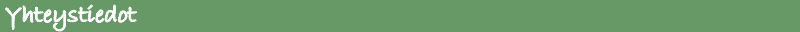
<style>
.page{position:relative;width:800px;height:32px;background:#669966}
.page>*{position:absolute;margin:0}
.t1{font:24px "BradleyHandITC";letter-spacing:-0.01em;color:#ffffff;font-weight:bold}
</style>
<div class="page">
<p class="t1" style="left:5px;top:5px;width:132px;height:26px">Yhteystiedot</p>
</div>
